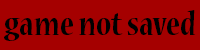
<style>
.page{position:relative;width:200px;height:50px;background:#a50000}
.page>*{position:absolute;margin:0}
.t1{font:36px "NuevaStd-BoldCond";color:#000000}
</style>
<div class="page">
<p class="t1" style="left:4px;top:10px;width:192px;height:31px">game not saved</p>
</div>
